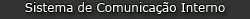
<style>
.page{position:relative;width:250px;height:19px;background:#333333}
.page>*{position:absolute;margin:0}
.t1{font:12px "Verdana";color:#ffffff}
</style>
<div class="page">
<p class="t1" style="left:25px;top:2px;width:200px;height:12px">Sistema de Comunicação Interno</p>
</div>
